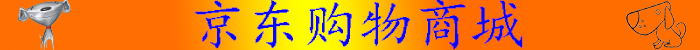
<style>
.page{position:relative;width:700px;height:50px;background:#ff6d00}
.page>*{position:absolute;margin:0}
.t1{font:54.2px "¿¬Ìå";color:#0903fa}
</style>
<div class="page">
<p class="t1" style="left:195px;top:0px;width:328px;height:49px">京东购物商城</p>
</div>
